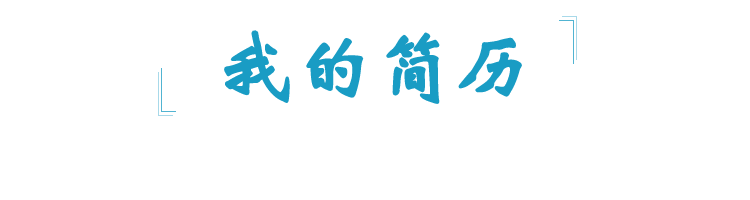
<style>
.page{position:relative;width:750px;height:200px;background:#ffffff}
.page>*{position:absolute;margin:0}
.t1{font:78px "STXinwei";color:#199cc4;font-weight:bold}
</style>
<div class="page">
<p class="t1" style="left:224px;top:30px;width:298px;height:74px">我的简历</p>
</div>
